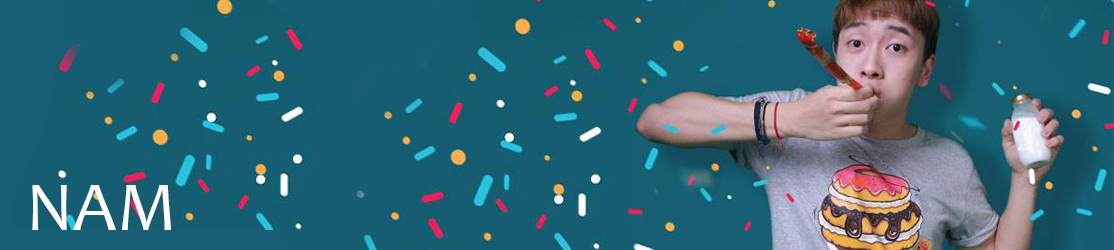
<style>
.page{position:relative;width:1114px;height:250px}
.page>*{position:absolute;margin:0}
.t1{font:70.7px "Candara";color:#ffffff}
</style>
<div class="page">
<p class="t1" style="left:32px;top:185px;width:139px;height:45px">NAM</p>
</div>
